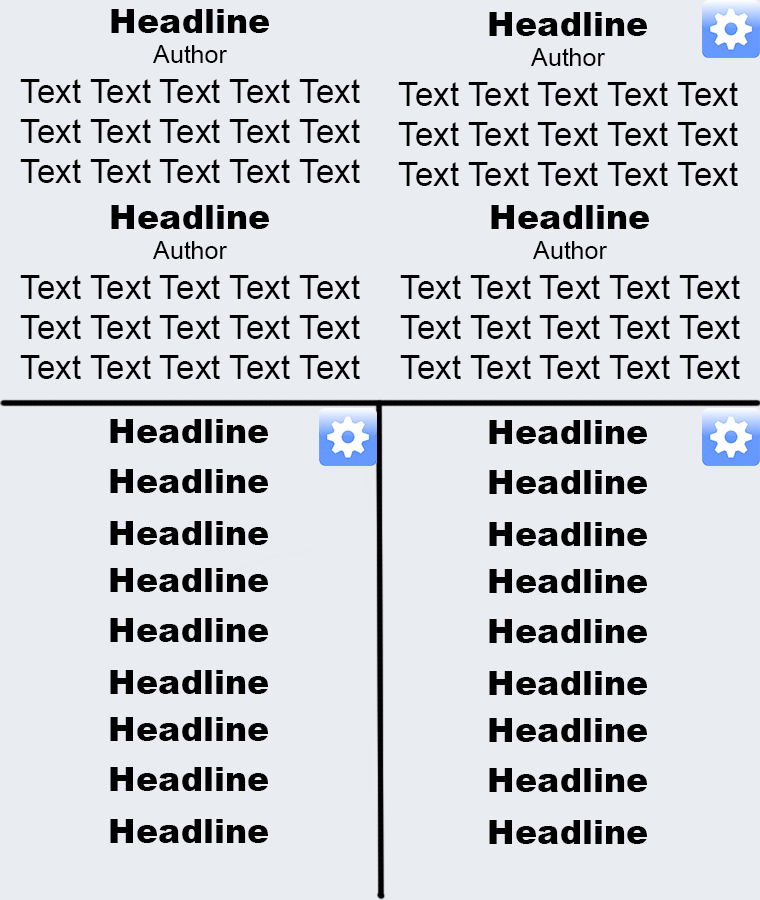
<style>
.page{position:relative;width:760px;height:900px;background:#e9ecf0}
.page>*{position:absolute;margin:0}
.t1{font:33.3px "ArialMT";color:#000000}
.t2{font:33.3px "Arial-Black";color:#000000}
.t3{font:25px "ArialMT";color:#000000}
</style>
<div class="page">
<p class="t1" style="left:20px;top:9px;width:340px;height:174px;text-align:center"><span class="t2">Headline<br></span><span class="t3">Author<br></span>Text Text Text Text Text Text Text Text Text Text Text Text Text Text Text Text</p>
<p class="t1" style="left:398px;top:12px;width:340px;height:174px;text-align:center"><span class="t2">Headline<br></span><span class="t3">Author<br></span>Text Text Text Text Text Text Text Text Text Text Text Text Text Text Text Text</p>
<p class="t1" style="left:20px;top:205px;width:340px;height:174px;text-align:center"><span class="t2">Headline<br></span><span class="t3">Author<br></span>Text Text Text Text Text Text Text Text Text Text Text Text Text Text Text Text</p>
<p class="t1" style="left:400px;top:205px;width:340px;height:174px;text-align:center"><span class="t2">Headline<br></span><span class="t3">Author<br></span>Text Text Text Text Text Text Text Text Text Text Text Text Text Text Text Text</p>
<p class="t2" style="left:110px;top:419px;width:158px;height:24px">Headline</p>
<p class="t2" style="left:489px;top:420px;width:158px;height:24px">Headline</p>
<p class="t2" style="left:110px;top:469px;width:158px;height:24px">Headline</p>
<p class="t2" style="left:489px;top:470px;width:158px;height:24px">Headline</p>
<p class="t2" style="left:110px;top:521px;width:158px;height:24px">Headline</p>
<p class="t2" style="left:489px;top:522px;width:158px;height:24px">Headline</p>
<p class="t2" style="left:110px;top:568px;width:158px;height:24px">Headline</p>
<p class="t2" style="left:489px;top:569px;width:158px;height:24px">Headline</p>
<p class="t2" style="left:110px;top:618px;width:158px;height:24px">Headline</p>
<p class="t2" style="left:489px;top:619px;width:158px;height:24px">Headline</p>
<p class="t2" style="left:110px;top:670px;width:158px;height:24px">Headline</p>
<p class="t2" style="left:489px;top:671px;width:158px;height:24px">Headline</p>
<p class="t2" style="left:110px;top:717px;width:158px;height:24px">Headline</p>
<p class="t2" style="left:489px;top:718px;width:158px;height:24px">Headline</p>
<p class="t2" style="left:110px;top:767px;width:158px;height:24px">Headline</p>
<p class="t2" style="left:489px;top:768px;width:158px;height:24px">Headline</p>
<p class="t2" style="left:110px;top:819px;width:158px;height:24px">Headline</p>
<p class="t2" style="left:489px;top:820px;width:158px;height:24px">Headline</p>
</div>
